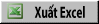
<style>
.page{position:relative;width:99px;height:24px;background:#bdbdbd}
.page>*{position:absolute;margin:0}
.t1{font:16.5px "MyriadPro-Bold";color:#000000;scale:0.67 1}
</style>
<div class="page">
<p class="t1" style="left:34px;top:4px;width:51px;height:14px">Xuất Excel</p>
</div>
